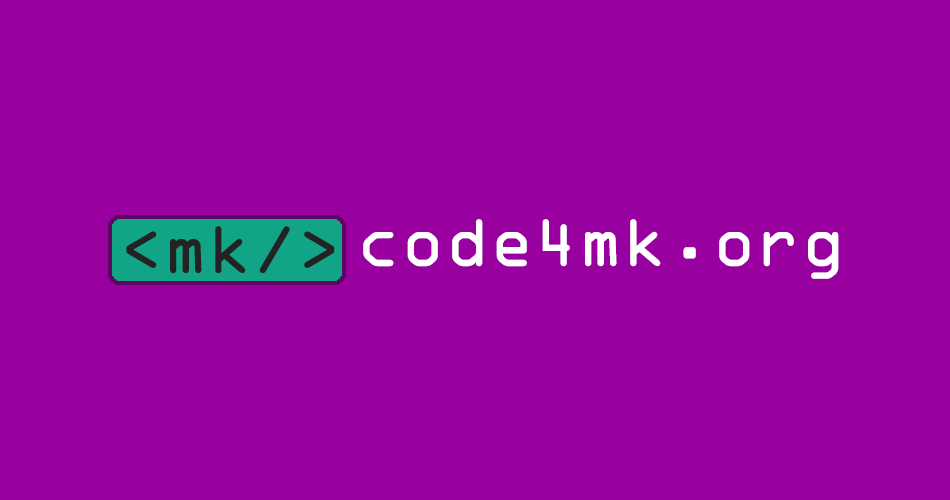
<style>
.page{position:relative;width:950px;height:500px;background:#9800a0}
.page>*{position:absolute;margin:0}
.t1{font:72px "OCRAbyBT-Regular";color:#ffffff}
.t2{font:72px "OCRAbyBT-Regular";color:#242323}
</style>
<div class="page">
<p class="t1" style="left:363px;top:219px;width:476px;height:60px">code4mk.org</p>
<p class="t2" style="left:126px;top:226px;width:209px;height:48px">&lt;mk/&gt;</p>
</div>
